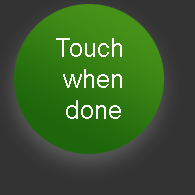
<style>
.page{position:relative;width:195px;height:195px;background:#333333}
.page>*{position:absolute;margin:0}
.t1{font:26px "ArialMT";color:#ffffff}
</style>
<div class="page">
<p class="t1" style="left:56px;top:38px;width:66px;height:81px;text-align:center">Touch <br>when<br>done</p>
</div>
